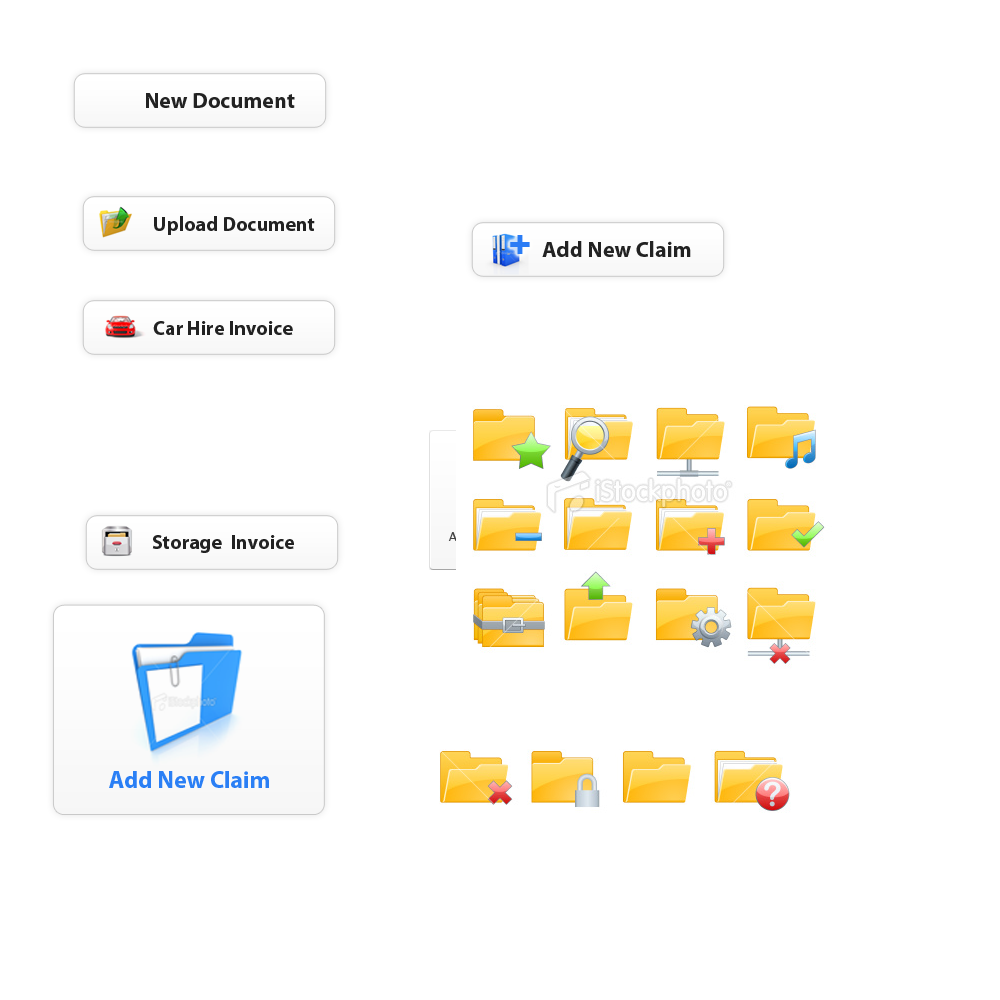
<style>
.page{position:relative;width:1000px;height:1000px;background:#ffffff}
.page>*{position:absolute;margin:0}
.t1{font:22.1px "MyriadPro-Bold";color:#222222}
.t2{font:20px "MyriadPro-Bold";color:#222222}
.t3{font:40.8px "Impact";color:#2a7cf5}
.t4{font:24px "MyriadPro-Bold";color:#2a7ff5}
</style>
<div class="page">
<p class="t1" style="left:146px;top:93px;width:149px;height:15px">New Document</p>
<p class="t2" style="left:154px;top:216px;width:161px;height:19px">Upload Document</p>
<p class="t3" style="left:510px;top:235px;width:20px;height:19px">+</p>
<p class="t1" style="left:542px;top:241px;width:149px;height:16px">Add New Claim</p>
<p class="t2" style="left:153px;top:321px;width:140px;height:14px">Car Hire Invoice</p>
<p class="t2" style="left:152px;top:535px;width:142px;height:18px">Storage  Invoice</p>
<p class="t4" style="left:109px;top:771px;width:160px;height:17px">Add New Claim</p>
</div>
